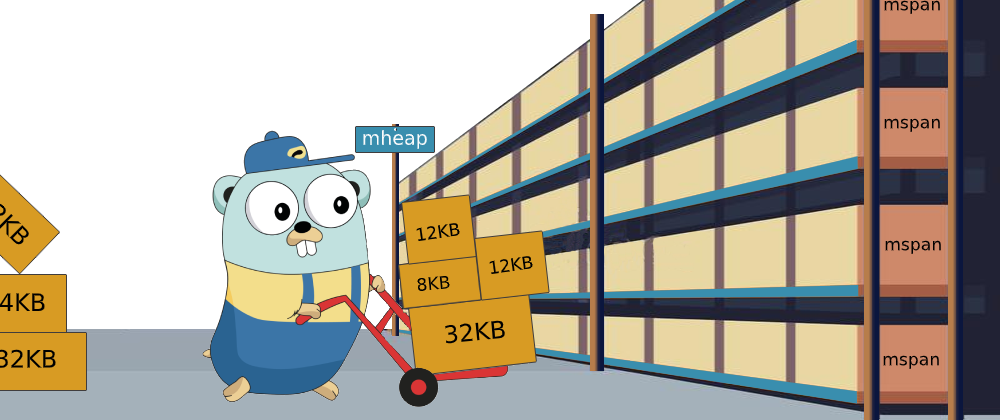
<style>
.page{position:relative;width:1000px;height:420px;background:#ffffff}
.page>*{position:absolute;margin:0}
.t1{font:16.7px "DejaVuSans";color:#000000;scale:1.03 1}
.t2{font:19px "DejaVuSans";color:#fbfbfb}
.t3{font:17.2px "DejaVuSans";color:#000000}
.t4{font:24px "DejaVuSans";color:#000000}
</style>
<div class="page">
<p class="t1" style="left:884px;top:0px;width:56px;height:14px">mspan</p>
<p class="t1" style="left:884px;top:118px;width:56px;height:14px">mspan</p>
<p class="t2" style="left:363px;top:130px;width:64px;height:19px">mheap</p>
<p class="t3" style="left:416px;top:223px;width:44px;height:18px;rotate:-8deg">12KB</p>
<p class="t1" style="left:885px;top:240px;width:56px;height:14px">mspan</p>
<p class="t3" style="left:489px;top:256px;width:44px;height:18px;rotate:-8deg">12KB</p>
<p class="t3" style="left:417px;top:276px;width:33px;height:15px;rotate:-5deg">8KB</p>
<p class="t4" style="left:445px;top:320px;width:60px;height:24px;rotate:-5deg">32KB</p>
<p class="t1" style="left:883px;top:355px;width:56px;height:14px">mspan</p>
</div>
